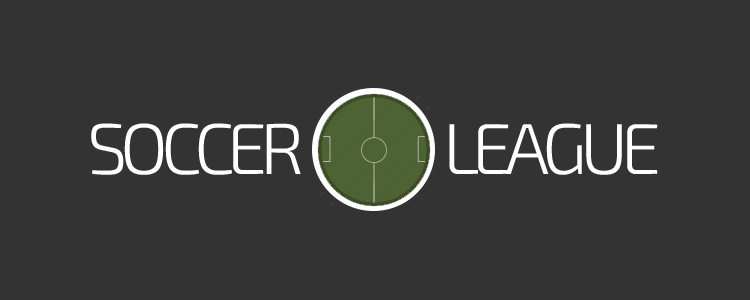
<style>
.page{position:relative;width:750px;height:300px;background:#333333}
.page>*{position:absolute;margin:0}
.t1{font:72px "Exo2-Light";letter-spacing:-0.1em;color:#ffffff}
</style>
<div class="page">
<p class="t1" style="left:91px;top:123px;width:567px;height:52px">SOCCER                LEAGUE</p>
</div>
